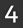
<style>
.page{position:relative;width:23px;height:28px;background:#333333}
.page>*{position:absolute;margin:0}
.t1{font:24px "Outfit-Regular";color:#ffffff;font-weight:bold;font-style:italic}
</style>
<div class="page">
<p class="t1" style="left:5px;top:5px;width:13px;height:18px">4</p>
</div>
